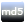
<style>
.page{position:relative;width:25px;height:25px;background:#ffffff}
.page>*{position:absolute;margin:0}
.t1{font:10px "Verdana";color:#ffffff}
</style>
<div class="page">
<p class="t1" style="left:2px;top:7px;width:21px;height:8px">md5</p>
</div>
